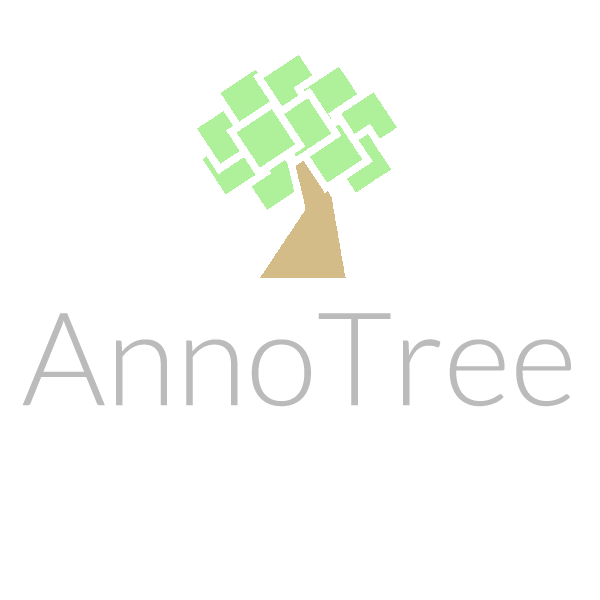
<style>
.page{position:relative;width:600px;height:600px;background:#ffffff}
.page>*{position:absolute;margin:0}
.t1{font:130px "Lato-Light";color:#bbbbbb}
</style>
<div class="page">
<p class="t1" style="left:22px;top:313px;width:549px;height:94px">AnnoTree</p>
</div>
